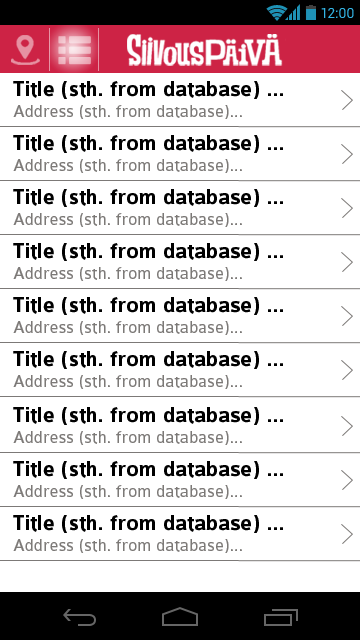
<style>
.page{position:relative;width:360px;height:640px;background:#ffffff}
.page>*{position:absolute;margin:0}
.t1{font:14px "Roboto-Regular";color:#33b5e5}
.t2{font:22px "Colaborate-Bold";color:#000000}
.t3{font:18px "Colaborate-Regular";color:#7c7977}
</style>
<div class="page">
<p class="t1" style="left:321px;top:8px;width:33px;height:10px">12:00</p>
<p class="t2" style="left:13px;top:81px;width:270px;height:18px">Title (sth. from database) ...</p>
<p class="t3" style="left:13px;top:105px;width:229px;height:14px">Address (sth. from database)...</p>
<p class="t2" style="left:13px;top:135px;width:270px;height:18px">Title (sth. from database) ...</p>
<p class="t3" style="left:13px;top:159px;width:229px;height:14px">Address (sth. from database)...</p>
<p class="t2" style="left:13px;top:189px;width:270px;height:18px">Title (sth. from database) ...</p>
<p class="t3" style="left:13px;top:213px;width:229px;height:14px">Address (sth. from database)...</p>
<p class="t2" style="left:13px;top:243px;width:270px;height:18px">Title (sth. from database) ...</p>
<p class="t3" style="left:13px;top:267px;width:229px;height:14px">Address (sth. from database)...</p>
<p class="t2" style="left:13px;top:297px;width:270px;height:18px">Title (sth. from database) ...</p>
<p class="t3" style="left:13px;top:321px;width:229px;height:14px">Address (sth. from database)...</p>
<p class="t2" style="left:13px;top:351px;width:270px;height:18px">Title (sth. from database) ...</p>
<p class="t3" style="left:13px;top:375px;width:229px;height:14px">Address (sth. from database)...</p>
<p class="t2" style="left:13px;top:407px;width:270px;height:18px">Title (sth. from database) ...</p>
<p class="t3" style="left:13px;top:431px;width:229px;height:14px">Address (sth. from database)...</p>
<p class="t2" style="left:13px;top:461px;width:270px;height:18px">Title (sth. from database) ...</p>
<p class="t3" style="left:13px;top:485px;width:229px;height:14px">Address (sth. from database)...</p>
<p class="t2" style="left:13px;top:515px;width:270px;height:18px">Title (sth. from database) ...</p>
<p class="t3" style="left:13px;top:539px;width:229px;height:14px">Address (sth. from database)...</p>
</div>
